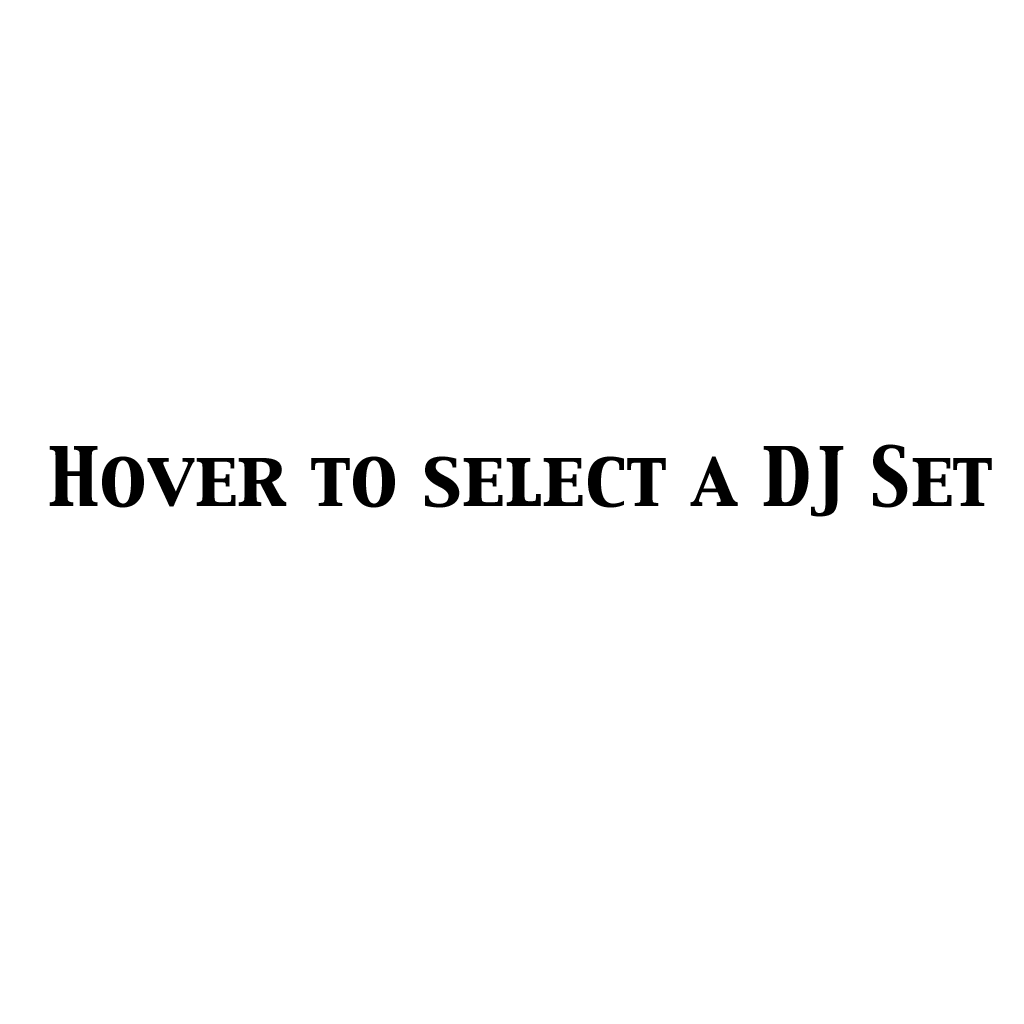
<style>
.page{position:relative;width:1024px;height:1024px;background:#ffffff}
.page>*{position:absolute;margin:0}
.t1{font:72px "CapitalsRegular";color:#000000}
</style>
<div class="page">
<p class="t1" style="left:49px;top:444px;width:943px;height:73px">Hover to select a DJ Set</p>
</div>
